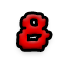
<style>
.page{position:relative;width:71px;height:71px;background:#ffffff}
.page>*{position:absolute;margin:0}
.t1{font:55px "Tipi-Organic"}
</style>
<div class="page">
<p class="t1" style="left:19px;top:14px;width:31px;height:35px">8</p>
</div>
